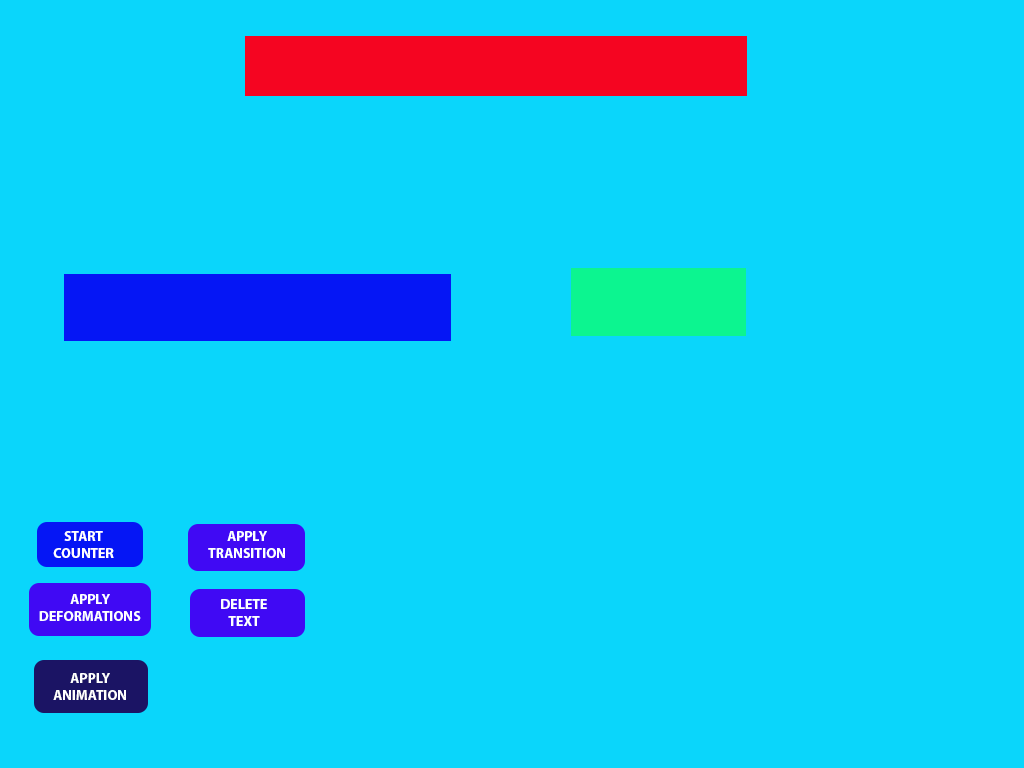
<style>
.page{position:relative;width:1024px;height:768px;background:#0ad6fb}
.page>*{position:absolute;margin:0}
.t1{font:14px "MyriadPro-Bold";color:#ffffff}
</style>
<div class="page">
<p class="t1" style="left:53px;top:531px;width:61px;height:27px;text-align:center">START<br>COUNTER</p>
<p class="t1" style="left:208px;top:531px;width:77px;height:27px;text-align:center">APPLY<br>TRANSITION</p>
<p class="t1" style="left:39px;top:594px;width:102px;height:27px;text-align:center">APPLY<br>DEFORMATIONS</p>
<p class="t1" style="left:221px;top:599px;width:46px;height:27px;text-align:center">DELETE<br>TEXT</p>
<p class="t1" style="left:53px;top:673px;width:73px;height:27px;text-align:center">APPLY<br>ANIMATION</p>
</div>
